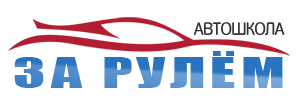
<style>
.page{position:relative;width:300px;height:103px;background:#ffffff}
.page>*{position:absolute;margin:0}
.t1{font:17.7px "Fregat";letter-spacing:-0.04em;color:#363636}
.t2{font:39.4px "Impact";letter-spacing:0.08em;scale:1.55 1}
</style>
<div class="page">
<p class="t1" style="left:194px;top:22px;width:91px;height:13px">АВТОШКОЛА</p>
<p class="t2" style="left:14px;top:51px;width:269px;height:37px">ЗА РУЛЁМ</p>
</div>
